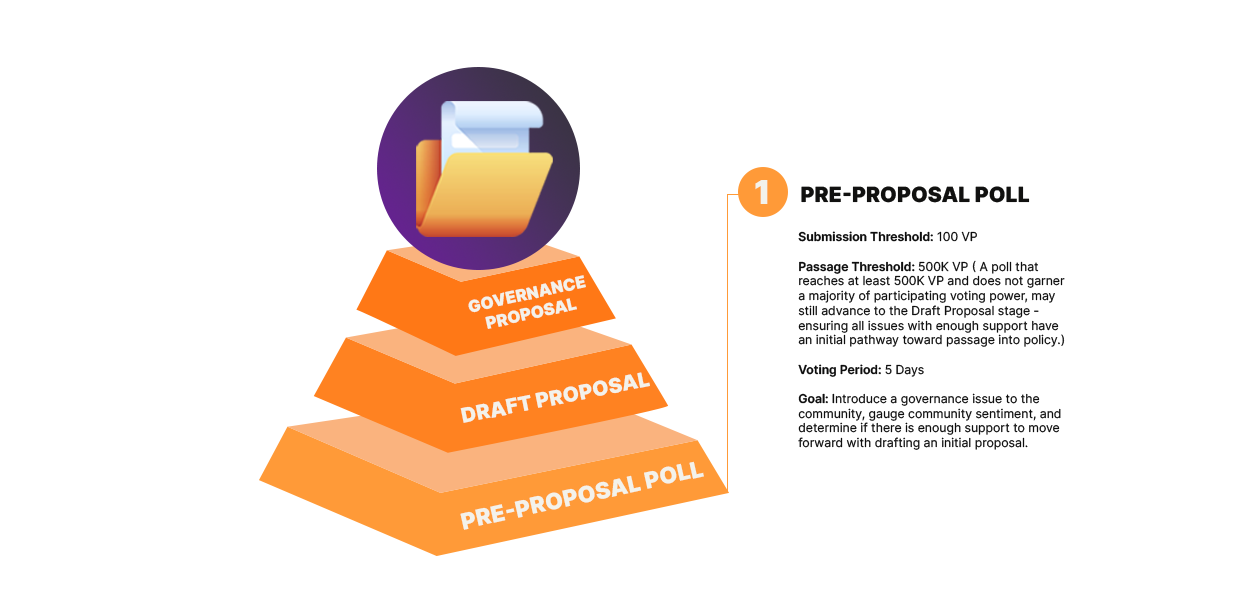
<style>
.page{position:relative;width:1240px;height:600px;background:#ffffff}
.page>*{position:absolute;margin:0}
.t1{font:33px "Inter-Black";color:#f3f2eb;text-transform:uppercase}
.t2{font:20.9px "Inter-Black";color:#111110;text-transform:uppercase}
.t3{font:12.2px "Inter-Regular";color:#0e0e0e}
.t4{font:12.2px "Inter-SemiBold";color:#0e0e0e}
.t5{font:16.3px "Inter-Black";color:#f3f2eb;text-transform:uppercase}
.t6{font:20.4px "Inter-Black";color:#f3f2eb;text-transform:uppercase}
.t7{font:22.6px "Inter-Black";color:#f3f2eb;text-transform:uppercase}
</style>
<div class="page">
<p class="t1" style="left:755px;top:180px;width:13px;height:24px">1</p>
<p class="t2" style="left:801px;top:186px;width:229px;height:17px">Pre-Proposal Poll</p>
<p class="t3" style="left:798px;top:231px;width:267px;height:219px"><span class="t4">Submission Threshold:</span> 100 VP<br><br><span class="t4">Passage Threshold: </span>500K VP ( A poll that reaches at least 500K VP and does not garner a majority of participating voting power, may still advance to the Draft Proposal stage - ensuring all issues with enough support have an initial pathway toward passage into policy.)<br><br><span class="t4">Voting Period: </span>5 Days<br><br><span class="t4">Goal: </span>Introduce a governance issue to the community, gauge community sentiment, and determine if there is enough support to move forward with drafting an initial proposal.</p>
<p class="t5" style="left:468px;top:275px;width:118px;height:54px;rotate:-13deg">Governance ProposaL</p>
<p class="t6" style="left:460px;top:372px;width:190px;height:51px;rotate:-11deg">Draft Proposal</p>
<p class="t7" style="left:460px;top:461px;width:244px;height:69px;rotate:-13deg">Pre-Proposal Poll</p>
</div>
